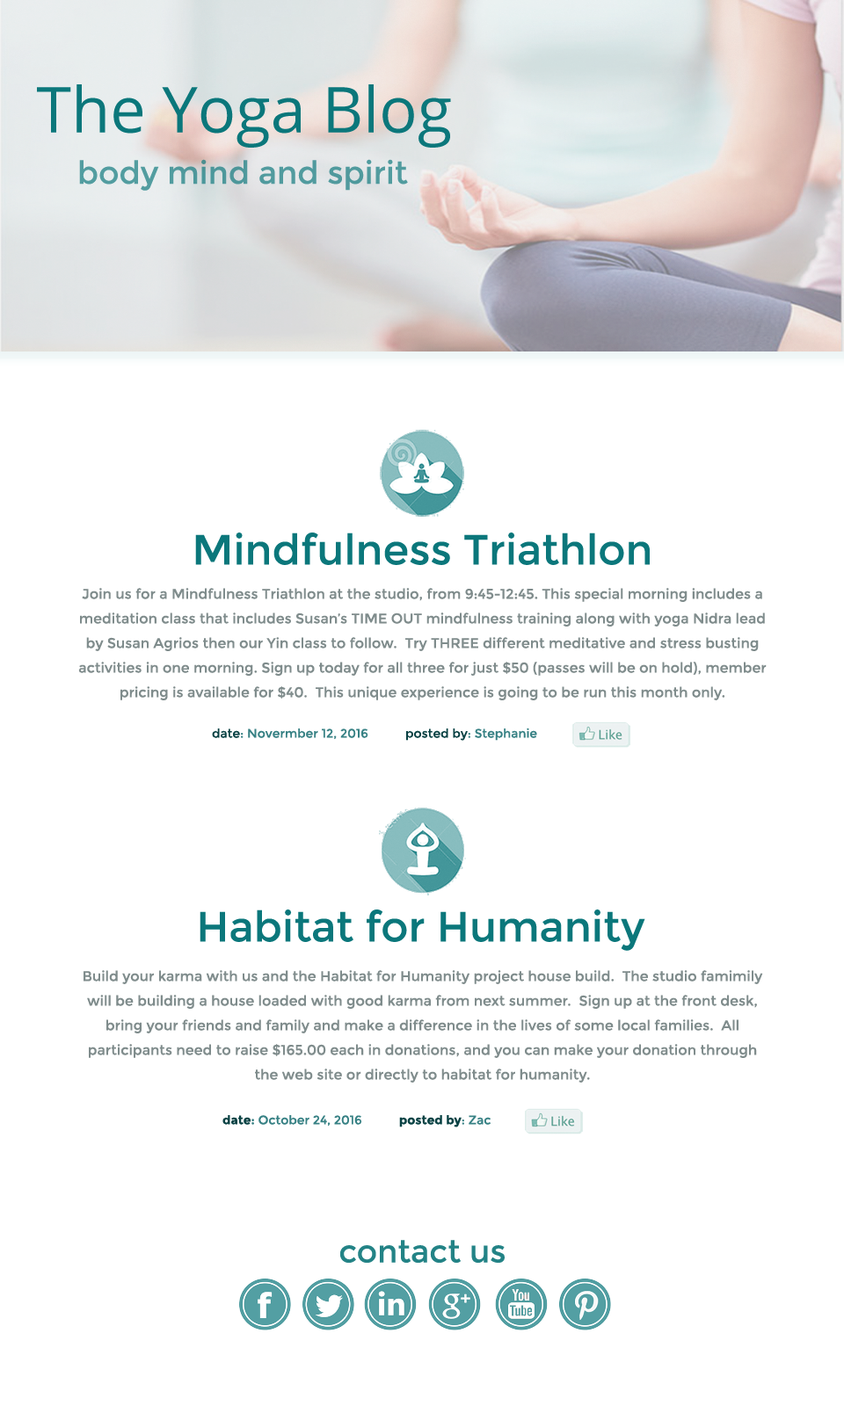
<style>
.page{position:relative;width:844px;height:1413px;background:#ffffff}
.page>*{position:absolute;margin:0}
.t1{font:42.2px "Montserrat-Regular";color:#0b777b}
.t2{font:14.1px/24.6px "Montserrat-Regular";color:#7f8c8c}
.t3{font:12.3px "Montserrat-Regular";color:#378184}
.t4{font:12.3px "Montserrat-Regular";color:#094244}
.t5{font:12.3px "Montserrat-Bold";color:#094244}
.t6{font:12.3px "Montserrat-Bold";color:#378184}
.t7{font:31.6px "Montserrat-Regular";color:#238386}
</style>
<div class="page">
<p class="t1" style="left:195px;top:532px;width:455px;height:33px">Mindfulness Triathlon</p>
<p class="t2" style="left:78px;top:588px;width:688px;height:112px;text-align:center">Join us for a Mindfulness Triathlon at the studio, from 9:45-12:45. This special morning includes a meditation class that includes Susan’s TIME OUT mindfulness training along with yoga Nidra lead by Susan Agrios then our Yin class to follow.  Try THREE different meditative and stress busting activities in one morning. Sign up today for all three for just $50 (passes will be on hold), member pricing is available for $40.  This unique experience is going to be run this month only.</p>
<p class="t3" style="left:212px;top:728px;width:325px;height:13px"><span class="t4">date</span>: Novermber 12, 2016           <span class="t4">posted by</span>: Stephanie</p>
<p class="t1" style="left:200px;top:909px;width:445px;height:42px">Habitat for Humanity</p>
<p class="t2" style="left:83px;top:970px;width:680px;height:113px;text-align:center">Build your karma with us and the Habitat for Humanity project house build.  The studio famimily will be building a house loaded with good karma from next summer.  Sign up at the front desk, bring your friends and family and make a difference in the lives of some local families.  All participants need to raise $165.00 each in donations, and you can make your donation through the web site or directly to habitat for humanity.</p>
<p class="t3" style="left:222px;top:1115px;width:268px;height:13px"><span class="t5">date</span><span class="t6">:</span> October 24, 2016           <span class="t5">posted by</span>: Zac</p>
<p class="t7" style="left:339px;top:1240px;width:165px;height:23px">contact us</p>
</div>
